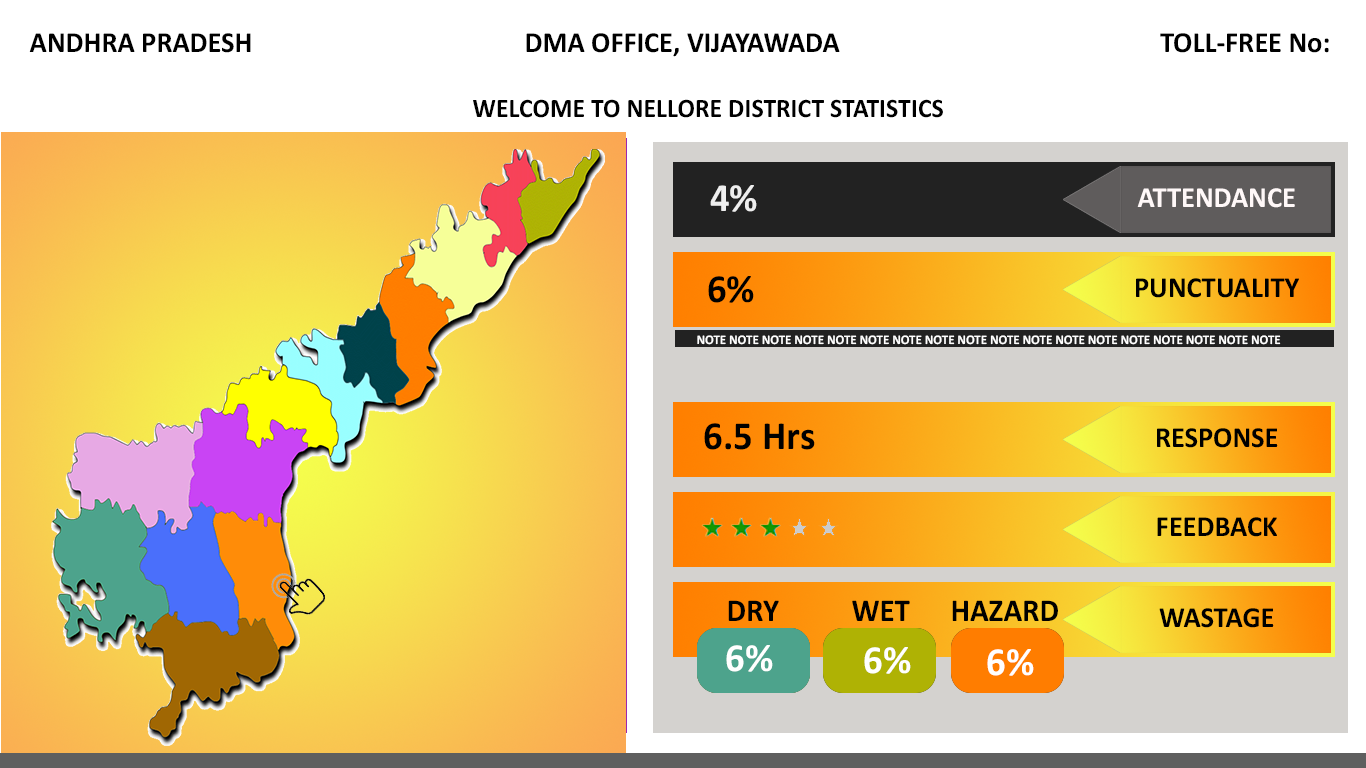
<style>
.page{position:relative;width:1366px;height:768px;background:#ffffff}
.page>*{position:absolute;margin:0}
.t1{font:29.3px "Calibri-Bold";color:#000000;scale:0.97 1}
.t2{font:26.7px "Calibri-Bold";color:#000000;scale:0.97 1}
.t3{font:40px "Calibri-Bold";color:#eeeeee;scale:0.97 1}
.t4{font:29.3px "Calibri-Bold";color:#fff8f8;scale:0.97 1}
.t5{font:40px "Calibri-Bold";color:#000000;scale:0.97 1}
.t6{font:13.3px "Calibri-Bold";color:#ffffff;scale:0.97 1}
.t7{font:32px "Calibri-Bold";color:#000000;scale:0.97 1}
.t8{font:40px "Calibri-Bold";color:#ffffff;scale:0.97 1}
</style>
<div class="page">
<p class="t1" style="left:29px;top:33px;width:222px;height:20px">ANDHRA PRADESH</p>
<p class="t1" style="left:526px;top:33px;width:314px;height:24px">DMA OFFICE, VIJAYAWADA</p>
<p class="t1" style="left:1160px;top:33px;width:169px;height:20px">TOLL-FREE No:</p>
<p class="t2" style="left:473px;top:99px;width:470px;height:19px">WELCOME TO NELLORE DISTRICT STATISTICS</p>
<p class="t3" style="left:710px;top:185px;width:47px;height:27px">4%</p>
<p class="t4" style="left:1137px;top:188px;width:158px;height:20px">ATTENDANCE</p>
<p class="t5" style="left:708px;top:276px;width:46px;height:27px">6%</p>
<p class="t1" style="left:1136px;top:278px;width:163px;height:20px">PUNCTUALITY</p>
<p class="t6" style="left:697px;top:335px;width:584px;height:10px">NOTE NOTE NOTE NOTE NOTE NOTE NOTE NOTE NOTE NOTE NOTE NOTE NOTE NOTE NOTE NOTE NOTE NOTE</p>
<p class="t5" style="left:704px;top:423px;width:111px;height:27px">6.5 Hrs</p>
<p class="t1" style="left:1157px;top:428px;width:121px;height:20px">RESPONSE</p>
<p class="t1" style="left:1157px;top:517px;width:120px;height:20px">FEEDBACK</p>
<p class="t7" style="left:728px;top:600px;width:51px;height:21px">DRY</p>
<p class="t7" style="left:852px;top:600px;width:58px;height:21px">WET</p>
<p class="t7" style="left:952px;top:600px;width:106px;height:21px">HAZARD</p>
<p class="t1" style="left:1159px;top:608px;width:115px;height:20px">WASTAGE</p>
<p class="t8" style="left:726px;top:645px;width:47px;height:27px">6%</p>
<p class="t8" style="left:864px;top:647px;width:47px;height:27px">6%</p>
<p class="t8" style="left:987px;top:649px;width:47px;height:27px">6%</p>
</div>
